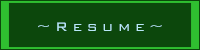
<style>
.page{position:relative;width:200px;height:50px;background:#0c470c}
.page>*{position:absolute;margin:0}
.t1{font:16.7px "BankGothicBT-Light";letter-spacing:0.28em;color:#b8e7f8}
</style>
<div class="page">
<p class="t1" style="left:38px;top:22px;width:124px;height:9px">~Resume~</p>
</div>
